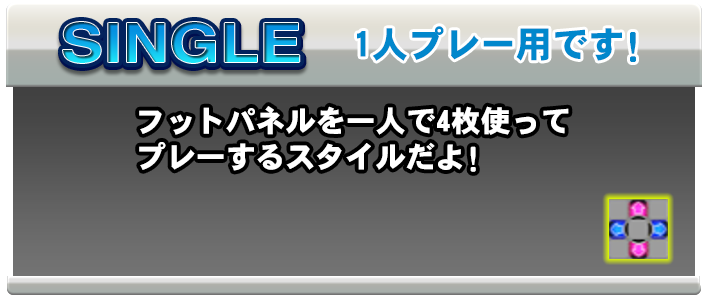
<style>
.page{position:relative;width:708px;height:308px}
.page>*{position:absolute;margin:0}
.t1{font:36px "DFHSGothic-W9-WIN-RKSJ-H";color:#0187cc}
.t2{font:30px "DFHSGothic-W9-WIN-RKSJ-H";color:#ffffff}
</style>
<div class="page">
<p class="t1" style="left:357px;top:26px;width:279px;height:36px">1人プレー用です!</p>
<p class="t2" style="left:139px;top:106px;width:430px;height:66px">フットパネルを一人で4枚使って<br>プレ一するスタイルだよ!</p>
</div>
